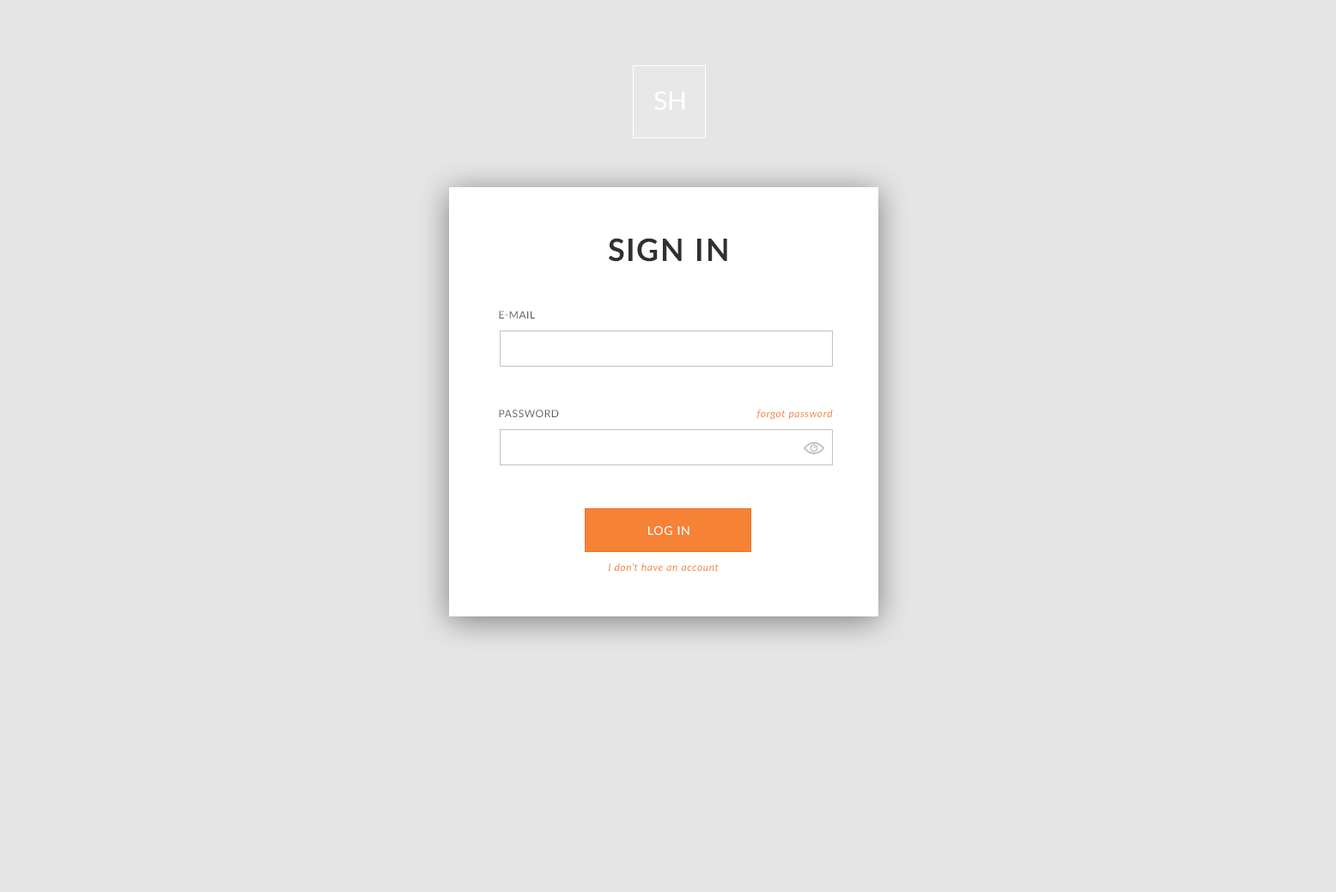
<style>
.page{position:relative;width:1336px;height:892px;background:#e5e5e5}
.page>*{position:absolute;margin:0}
.t1{font:25.8px "Lato-Regular";color:#ffffff;text-transform:uppercase}
.t2{font:30.9px "Lato-Bold";letter-spacing:0.05em;color:#303030;text-transform:uppercase}
.t3{font:10.3px "Lato-Regular";letter-spacing:0.05em;color:#606060;text-transform:uppercase}
.t4{font:10.3px "Lato-Italic";letter-spacing:0.05em;color:#f68236}
.t5{font:12px "Lato-Regular";letter-spacing:0.05em;color:#ffffff;text-transform:uppercase}
</style>
<div class="page">
<p class="t1" style="left:654px;top:91px;width:31px;height:20px">sh</p>
<p class="t2" style="left:608px;top:238px;width:119px;height:24px">Sign in</p>
<p class="t3" style="left:499px;top:311px;width:36px;height:8px">E-mail</p>
<p class="t3" style="left:499px;top:410px;width:60px;height:7px">Password</p>
<p class="t4" style="left:757px;top:410px;width:76px;height:10px">forgot password</p>
<p class="t5" style="left:648px;top:526px;width:42px;height:9px">log in</p>
<p class="t4" style="left:608px;top:563px;width:111px;height:8px">I don’t have an account</p>
</div>
